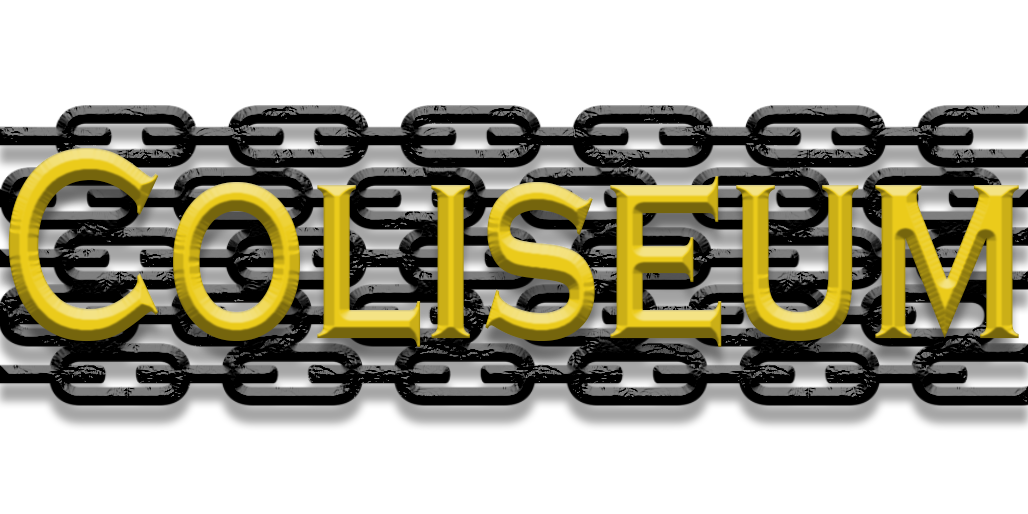
<style>
.page{position:relative;width:1028px;height:514px;background:#ffffff}
.page>*{position:absolute;margin:0}
.t1{font:279.9px "CopperplateGothic-Bold";scale:0.71 1}
</style>
<div class="page">
<p class="t1" style="left:8px;top:148px;width:1011px;height:199px">Coliseum</p>
</div>
